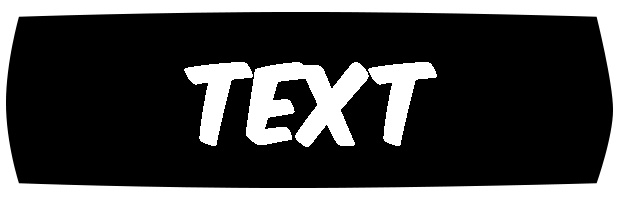
<style>
.page{position:relative;width:619px;height:200px;background:#000000}
.page>*{position:absolute;margin:0}
.t1{font:94.3px "KomikaAxis";color:#ffffff}
</style>
<div class="page">
<p class="t1" style="left:184px;top:62px;width:253px;height:85px">TEXT</p>
</div>
